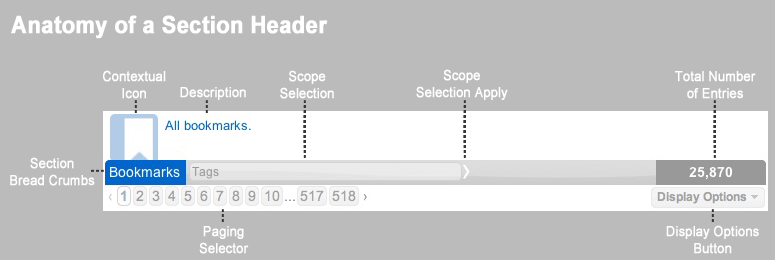
<style>
.page{position:relative;width:775px;height:260px;background:#bbbbbb}
.page>*{position:absolute;margin:0}
.t1{font:24px "Arial-BoldMT";color:#ffffff;font-weight:bold;scale:0.9 1}
.t2{font:14px "ArialMT";color:#ffffff;font-weight:bold;scale:0.9 1}
</style>
<div class="page">
<p class="t1" style="left:11px;top:15px;width:317px;height:24px">Anatomy of a Section Header</p>
<p class="t2" style="left:103px;top:70px;width:63px;height:29px;text-align:center">Contextual<br>Icon</p>
<p class="t2" style="left:280px;top:70px;width:54px;height:29px;text-align:center">Scope<br>Selection</p>
<p class="t2" style="left:416px;top:69px;width:92px;height:31px;text-align:center">Scope<br>Selection Apply</p>
<p class="t2" style="left:675px;top:71px;width:81px;height:28px;text-align:center">Total Number<br>of Entries</p>
<p class="t2" style="left:180px;top:87px;width:66px;height:13px">Description</p>
<p class="t2" style="left:10px;top:157px;width:85px;height:29px;text-align:center">Section<br>Bread Crumbs</p>
<p class="t2" style="left:199px;top:226px;width:50px;height:28px;text-align:center">Paging<br>Selector</p>
<p class="t2" style="left:666px;top:225px;width:93px;height:29px;text-align:center">Display Options<br>Button</p>
</div>
